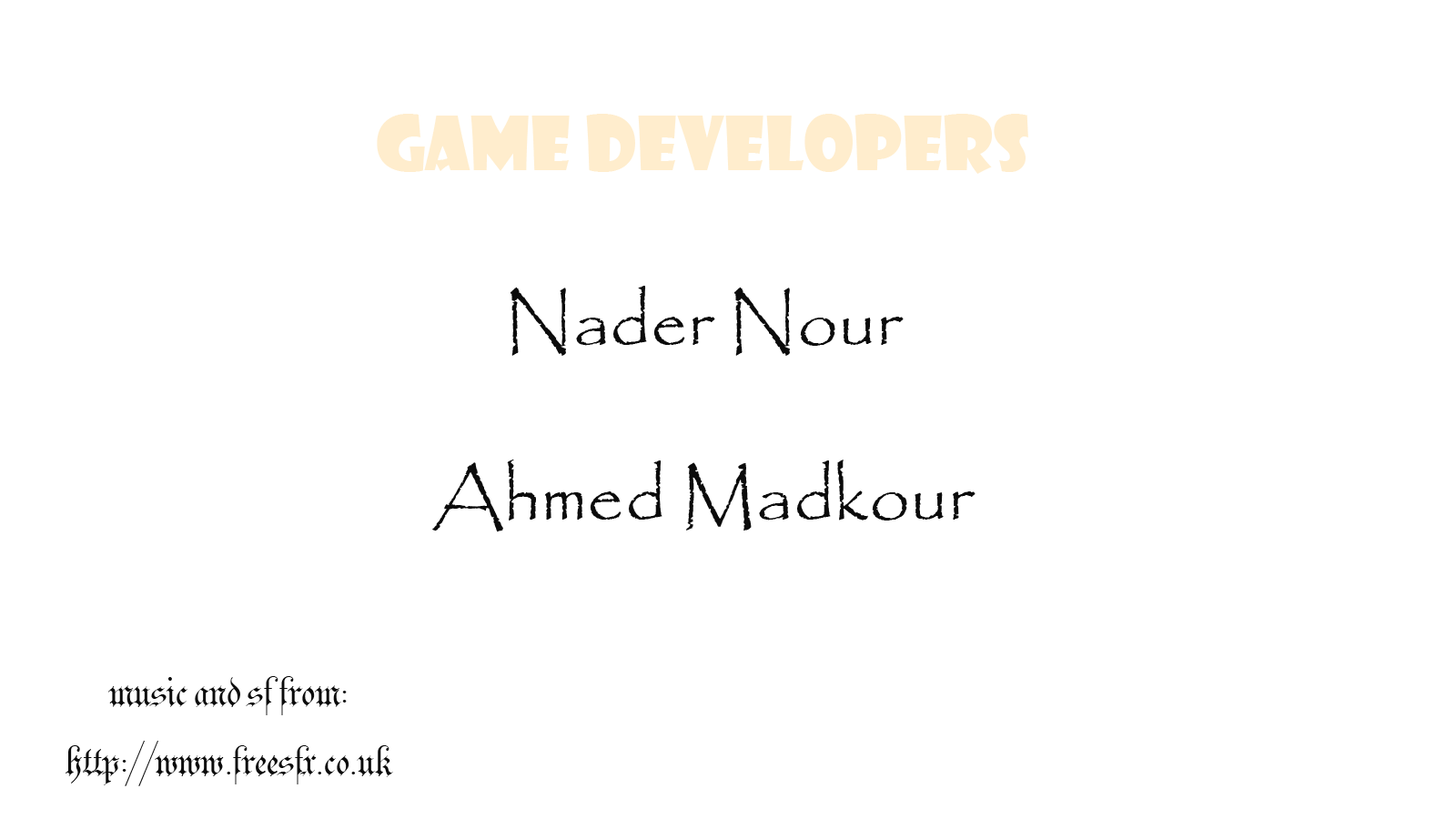
<style>
.page{position:relative;width:1456px;height:819px;background:#ffffff}
.page>*{position:absolute;margin:0}
.t1{font:72.8px "Papyrus-Regular";color:#0b0b0b}
.t2{font:72.8px "ShowcardGothic-Reg";color:#ffedcd}
.t3{font:72.8px "Parchment-Regular";color:#0b0b0b}
</style>
<div class="page">
<p class="t1" style="left:377px;top:114px;width:651px;height:418px;text-align:center"><span class="t2">Game Developers<br><br></span>Nader Nour<br><br>Ahmed Madkour</p>
<p class="t3" style="left:66px;top:676px;width:327px;height:110px;text-align:center">music and sf from:<br>http://www.freesfx.co.uk</p>
</div>
